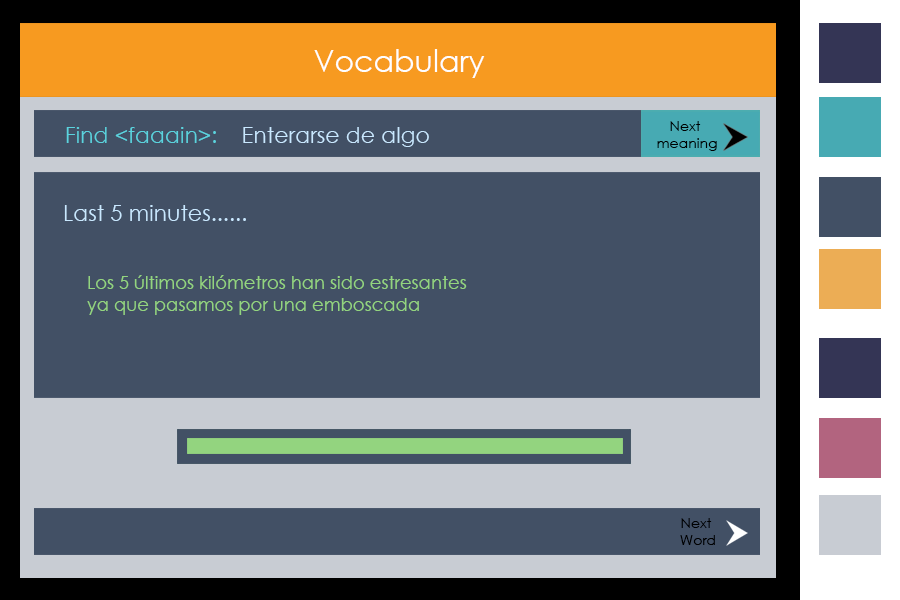
<style>
.page{position:relative;width:900px;height:600px;background:#425065}
.page>*{position:absolute;margin:0}
.t1{font:30px "CenturyGothic";color:#fefefe}
.t2{font:14px "CenturyGothic";color:#000000}
.t3{font:22px "CenturyGothic";color:#c9e8ff}
.t4{font:22px "CenturyGothic";color:#5bd3de}
.t5{font:18px "CenturyGothic";color:#93d47f}
</style>
<div class="page">
<p class="t1" style="left:314px;top:49px;width:171px;height:29px">Vocabulary</p>
<p class="t2" style="left:657px;top:121px;width:60px;height:30px;text-align:center">Next <br>meaning</p>
<p class="t3" style="left:66px;top:127px;width:363px;height:20px"><span class="t4">Find &lt;faaain&gt;:</span>    Enterarse de algo</p>
<p class="t3" style="left:64px;top:205px;width:182px;height:16px">Last 5 minutes......</p>
<p class="t5" style="left:87px;top:275px;width:380px;height:40px">Los 5 últimos kilómetros han sido estresantes <br>ya que pasamos por una emboscada</p>
<p class="t2" style="left:680px;top:518px;width:35px;height:27px;text-align:center">Next <br>Word</p>
</div>
